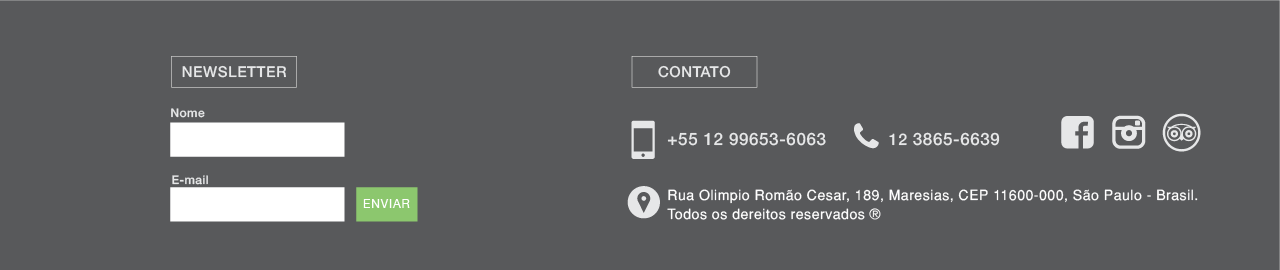
<style>
.page{position:relative;width:1280px;height:270px;background:#58595b}
.page>*{position:absolute;margin:0}
.t1{font:15px "Helvetica65-Medium";letter-spacing:0.035em;color:#e6e7e8}
.t2{font:12px "Helvetica65-Medium";letter-spacing:0.035em;color:#e6e7e8}
.t3{font:17px "Helvetica65-Medium";letter-spacing:0.035em;color:#e6e7e8}
.t4{font:16px "Helvetica65-Medium";letter-spacing:0.035em;color:#e6e7e8}
.t5{font:14px/19px "Helvetica-Normal";letter-spacing:0.037em;color:#ffffff}
.t6{font:12px "HelveticaNeue";letter-spacing:0.075em;color:#ffffff}
</style>
<div class="page">
<p class="t1" style="left:182px;top:65px;width:104px;height:13px">NEWSLETTER</p>
<p class="t1" style="left:658px;top:65px;width:73px;height:13px">CONTATO</p>
<p class="t2" style="left:171px;top:108px;width:34px;height:10px">Nome</p>
<p class="t3" style="left:667px;top:132px;width:159px;height:14px">+55 12 99653-6063</p>
<p class="t3" style="left:889px;top:132px;width:111px;height:14px"><span class="t4">12 </span>3865-6639</p>
<p class="t2" style="left:172px;top:175px;width:36px;height:10px">E-mail</p>
<p class="t5" style="left:667px;top:189px;width:531px;height:31px">Rua Olimpio Romão Cesar, 189, Maresias, CEP 11600-000, São Paulo - Brasil.<br>Todos os dereitos reservados ®</p>
<p class="t6" style="left:363px;top:199px;width:47px;height:9px">ENVIAR</p>
</div>
